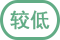
<style>
.page{position:relative;width:60px;height:40px;background:#ffffff}
.page>*{position:absolute;margin:0}
.t1{font:20px "SimHei";color:#61ac85;text-transform:uppercase;font-weight:bold}
</style>
<div class="page">
<p class="t1" style="left:10px;top:10px;width:20px;height:20px">较低</p>
<p class="t1" style="left:30px;top:10px;width:20px;height:20px">低</p>
</div>
